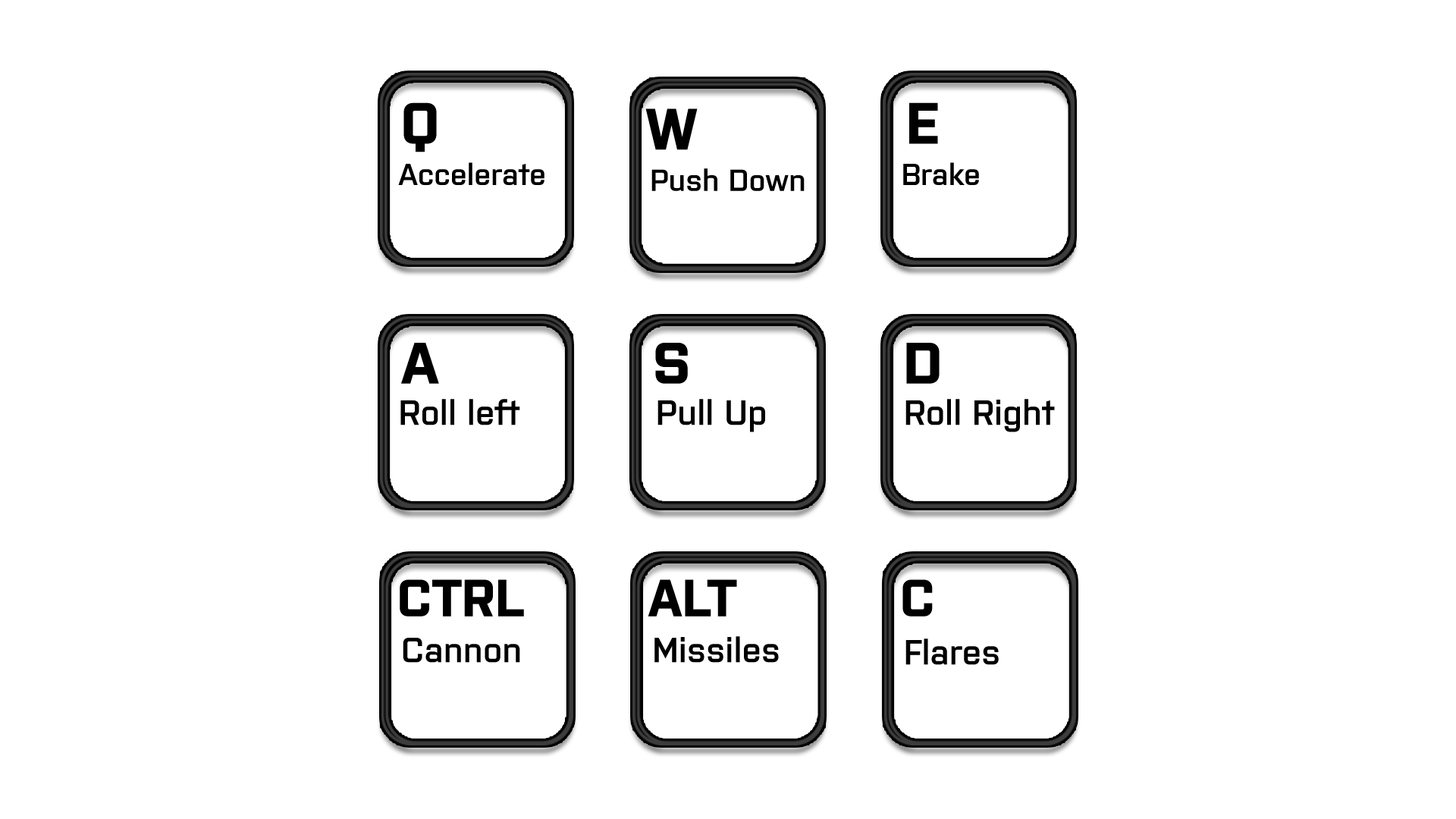
<style>
.page{position:relative;width:1456px;height:819px;background:#ffffff}
.page>*{position:absolute;margin:0}
.t1{font:58.2px "Purista-Bold";color:#000000}
.t2{font:30.3px "Purista-SemiBold";color:#000000}
.t3{font:34.9px "Purista-SemiBold";color:#000000}
.t4{font:52.4px "Purista-Bold";color:#000000}
</style>
<div class="page">
<p class="t1" style="left:403px;top:102px;width:34px;height:50px">Q</p>
<p class="t1" style="left:645px;top:108px;width:53px;height:42px">W</p>
<p class="t1" style="left:909px;top:102px;width:29px;height:42px">E</p>
<p class="t2" style="left:398px;top:162px;width:146px;height:23px">Accelerate</p>
<p class="t2" style="left:651px;top:168px;width:154px;height:23px">Push Down</p>
<p class="t2" style="left:903px;top:162px;width:76px;height:23px">Brake</p>
<p class="t1" style="left:401px;top:343px;width:38px;height:41px">A</p>
<p class="t1" style="left:655px;top:343px;width:33px;height:41px">S</p>
<p class="t1" style="left:906px;top:343px;width:34px;height:41px">D</p>
<p class="t3" style="left:400px;top:399px;width:120px;height:26px">Roll left</p>
<p class="t3" style="left:657px;top:399px;width:108px;height:33px">Pull Up</p>
<p class="t3" style="left:905px;top:399px;width:150px;height:33px">Roll Right</p>
<p class="t4" style="left:400px;top:579px;width:124px;height:38px">CTRL</p>
<p class="t4" style="left:648px;top:579px;width:89px;height:38px">ALT</p>
<p class="t4" style="left:902px;top:579px;width:31px;height:38px">C</p>
<p class="t3" style="left:403px;top:638px;width:117px;height:25px">Cannon</p>
<p class="t3" style="left:654px;top:636px;width:125px;height:27px">Missiles</p>
<p class="t3" style="left:905px;top:639px;width:94px;height:26px">Flares</p>
</div>
